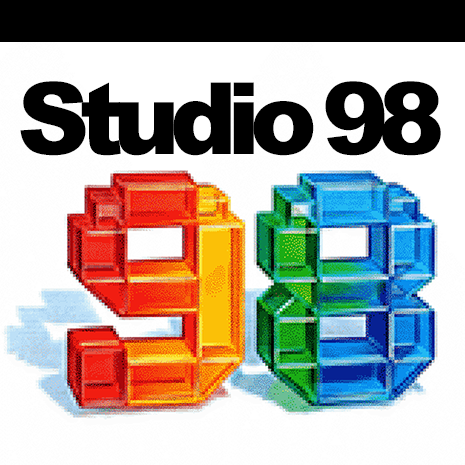
<style>
.page{position:relative;width:465px;height:465px;background:#ffffff}
.page>*{position:absolute;margin:0}
.t1{font:100px "Arial-Black";color:#000000}
</style>
<div class="page">
<p class="t1" style="left:20px;top:81px;width:421px;height:75px">Studio98</p>
</div>
